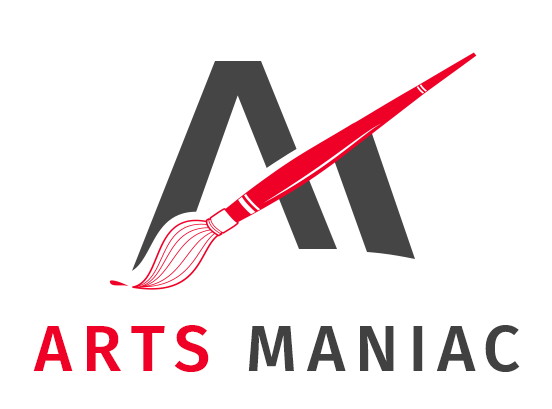
<style>
.page{position:relative;width:552px;height:409px;background:#ffffff}
.page>*{position:absolute;margin:0}
.t1{font:65px "FiraSans-Medium";letter-spacing:0.15em;color:#414141;text-transform:uppercase}
.t2{font:65px "FiraSans-Medium";letter-spacing:0.15em;color:#ef0027;text-transform:uppercase}
</style>
<div class="page">
<p class="t1" style="left:33px;top:325px;width:487px;height:47px"><span class="t2">arts</span> maniac</p>
</div>
